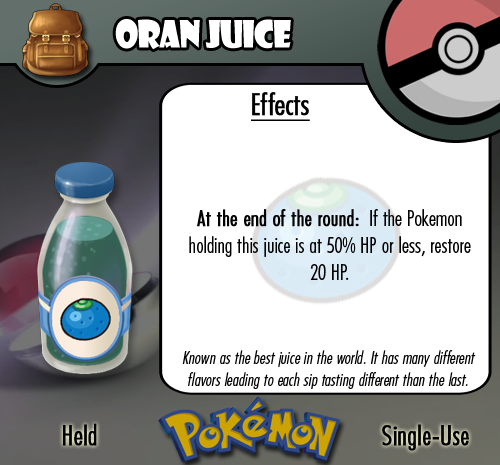
<style>
.page{position:relative;width:500px;height:465px;background:#ffffff}
.page>*{position:absolute;margin:0}
.t1{font:36.7px "ShowcardGothic-Reg";letter-spacing:-0.025em;color:#ffffff;scale:0.91 1}
.t2{font:22.2px "FuturaCondensedBQ-Light";color:#010101}
.t3{font:27.8px "FuturaCondensedBQ-Light";color:#010101;font-weight:bold}
.t4{font:30.6px "FuturaCondensedBQ-Light";color:#010101;font-weight:bold;text-decoration:underline}
.t5{font:22.2px "FuturaCondensedBQ-Light";color:#010101;font-weight:bold}
.t6{font:18.1px "FuturaCondensedBQ-Light";color:#010101;font-style:italic}
</style>
<div class="page">
<p class="t1" style="left:115px;top:19px;width:176px;height:31px">Oran Juice</p>
<p class="t2" style="left:189px;top:92px;width:282px;height:188px"><span class="t3">  </span><span class="t4">Effects<br><br><br><br><br><br></span><span class="t5">At the end of the round:</span>  If the Pokemon holding this juice is at 50% HP or less, restore 20 HP.</p>
<p class="t6" style="left:182px;top:350px;width:294px;height:39px;text-align:center">Known as the best juice in the world. It has many different flavors leading to each sip tasting different than the last.</p>
<p class="t3" style="left:63px;top:423px;width:34px;height:23px">Held</p>
<p class="t3" style="left:382px;top:424px;width:87px;height:27px">Single-Use</p>
</div>
